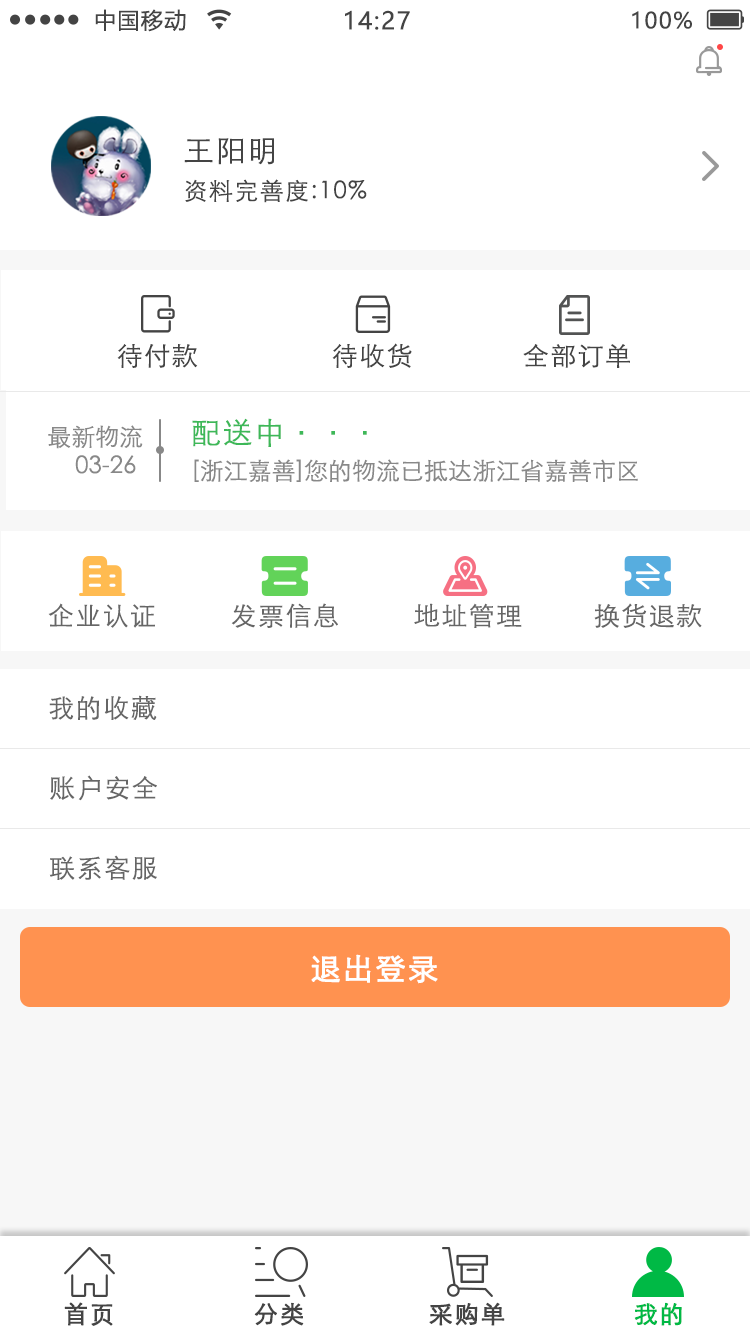
<style>
.page{position:relative;width:750px;height:1334px;background:#ffffff}
.page>*{position:absolute;margin:0}
.t1{font:22px "MicrosoftYaHei";letter-spacing:0.06em;color:#444444}
.t2{font:24px "MicrosoftYaHei";letter-spacing:0.06em;color:#444444}
.t3{font:30px "STXihei";letter-spacing:0.06em;color:#444444}
.t4{font:24px "STXihei";letter-spacing:0.06em;color:#444444}
.t5{font:25.9px "STXihei";letter-spacing:0.06em;color:#444444}
.t6{font:24px "STXihei";color:#888888}
.t7{font:30px "STXihei";letter-spacing:0.06em;color:#3db858}
.t8{font:25.9px "STXihei";letter-spacing:0.06em;color:#666666}
.t9{font:26px "STXihei";letter-spacing:0.06em;color:#666666}
.t10{font:29.9px "STXihei";letter-spacing:0.06em;color:#ffffff;font-weight:bold}
.t11{font:24px "STXihei";letter-spacing:0.06em;color:#444444;font-weight:bold}
.t12{font:24px "STXihei";letter-spacing:0.06em;color:#00b945;font-weight:bold}
</style>
<div class="page">
<p class="t1" style="left:95px;top:9px;width:91px;height:23px">中国移动</p>
<p class="t2" style="left:345px;top:10px;width:65px;height:20px">14:27</p>
<p class="t1" style="left:632px;top:11px;width:60px;height:18px">100%</p>
<p class="t3" style="left:184px;top:138px;width:90px;height:27px">王阳明</p>
<p class="t4" style="left:185px;top:179px;width:182px;height:24px">资料完善度:10%</p>
<p class="t5" style="left:117px;top:344px;width:81px;height:24px">待付款</p>
<p class="t5" style="left:332px;top:343px;width:80px;height:25px">待收货</p>
<p class="t5" style="left:523px;top:344px;width:107px;height:24px">全部订单</p>
<p class="t6" style="left:48px;top:425px;width:95px;height:24px">最新物流</p>
<p class="t7" style="left:192px;top:418px;width:175px;height:29px">配送中···</p>
<p class="t6" style="left:75px;top:455px;width:61px;height:19px">03-26</p>
<p class="t6" style="left:194px;top:459px;width:444px;height:23px">[浙江嘉善]您的物流已抵达浙江省嘉善市区</p>
<p class="t8" style="left:48px;top:603px;width:107px;height:25px">企业认证</p>
<p class="t8" style="left:231px;top:603px;width:107px;height:25px">发票信息</p>
<p class="t8" style="left:414px;top:603px;width:108px;height:25px">地址管理</p>
<p class="t8" style="left:594px;top:603px;width:108px;height:25px">换货退款</p>
<p class="t9" style="left:49px;top:695px;width:108px;height:25px">我的收藏</p>
<p class="t9" style="left:50px;top:775px;width:107px;height:26px">账户安全</p>
<p class="t9" style="left:49px;top:855px;width:108px;height:25px">联系客服</p>
<p class="t10" style="left:311px;top:954px;width:127px;height:30px">退出登录</p>
<p class="t11" style="left:64px;top:1302px;width:49px;height:24px">首页</p>
<p class="t11" style="left:254px;top:1302px;width:50px;height:24px">分类</p>
<p class="t11" style="left:429px;top:1302px;width:76px;height:24px">采购单</p>
<p class="t12" style="left:634px;top:1302px;width:48px;height:24px">我的</p>
</div>
